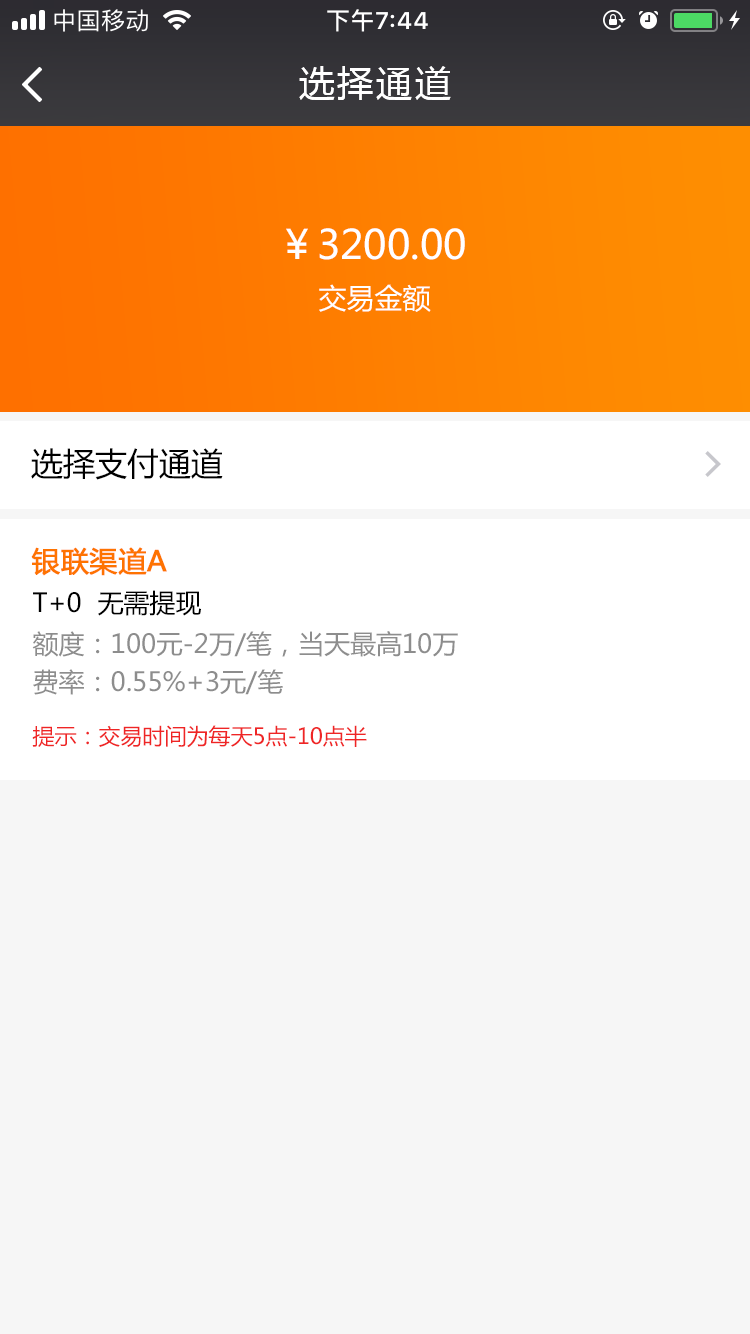
<style>
.page{position:relative;width:750px;height:1334px;background:#f6f6f6}
.page>*{position:absolute;margin:0}
.t1{font:36px "MicrosoftYaHei";letter-spacing:0.08em;color:#ffffff}
.t2{font:40px "MicrosoftYaHei";color:#ffffff}
.t3{font:28px "MicrosoftYaHei";color:#ffffff}
.t4{font:32px "MicrosoftYaHei";color:#000000}
.t5{font:28px "MicrosoftYaHei";color:#fe7301;font-weight:bold}
.t6{font:26px "MicrosoftYaHei";color:#000000}
.t7{font:26px "MicrosoftYaHei";color:#8d8d8d}
.t8{font:22px "MicrosoftYaHei";color:#ef2525}
</style>
<div class="page">
<p class="t1" style="left:299px;top:66px;width:152px;height:34px">选择通道</p>
<p class="t2" style="left:286px;top:228px;width:179px;height:32px">￥3200.00</p>
<p class="t3" style="left:319px;top:284px;width:112px;height:28px">交易金额</p>
<p class="t4" style="left:31px;top:448px;width:192px;height:32px">选择支付通道</p>
<p class="t5" style="left:31px;top:547px;width:136px;height:29px">银联渠道A</p>
<p class="t6" style="left:33px;top:590px;width:168px;height:26px">T+0  无需提现</p>
<p class="t7" style="left:32px;top:631px;width:426px;height:26px">额度：100元-2万/笔，当天最高10万</p>
<p class="t7" style="left:33px;top:669px;width:250px;height:26px">费率：0.55%+3元/笔</p>
<p class="t8" style="left:32px;top:725px;width:335px;height:23px">提示：交易时间为每天5点-10点半</p>
</div>
